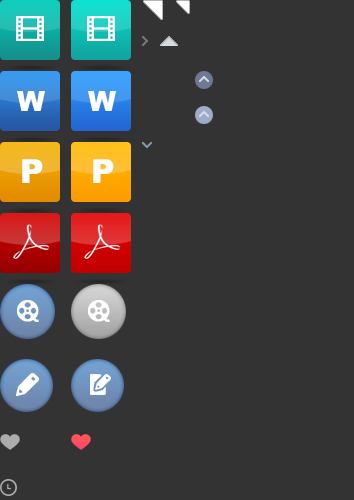
<style>
.page{position:relative;width:354px;height:500px;background:#333333}
.page>*{position:absolute;margin:0}
.t1{font:27.5px "Arial-Black";color:#ffffff}
.t2{font:33.2px "Arial-Black";color:#ffffff}
</style>
<div class="page">
<p class="t1" style="left:17px;top:91px;width:28px;height:20px">W</p>
<p class="t1" style="left:88px;top:91px;width:28px;height:20px">W</p>
<p class="t2" style="left:22px;top:159px;width:21px;height:24px">P</p>
<p class="t2" style="left:93px;top:159px;width:21px;height:24px">P</p>
</div>
